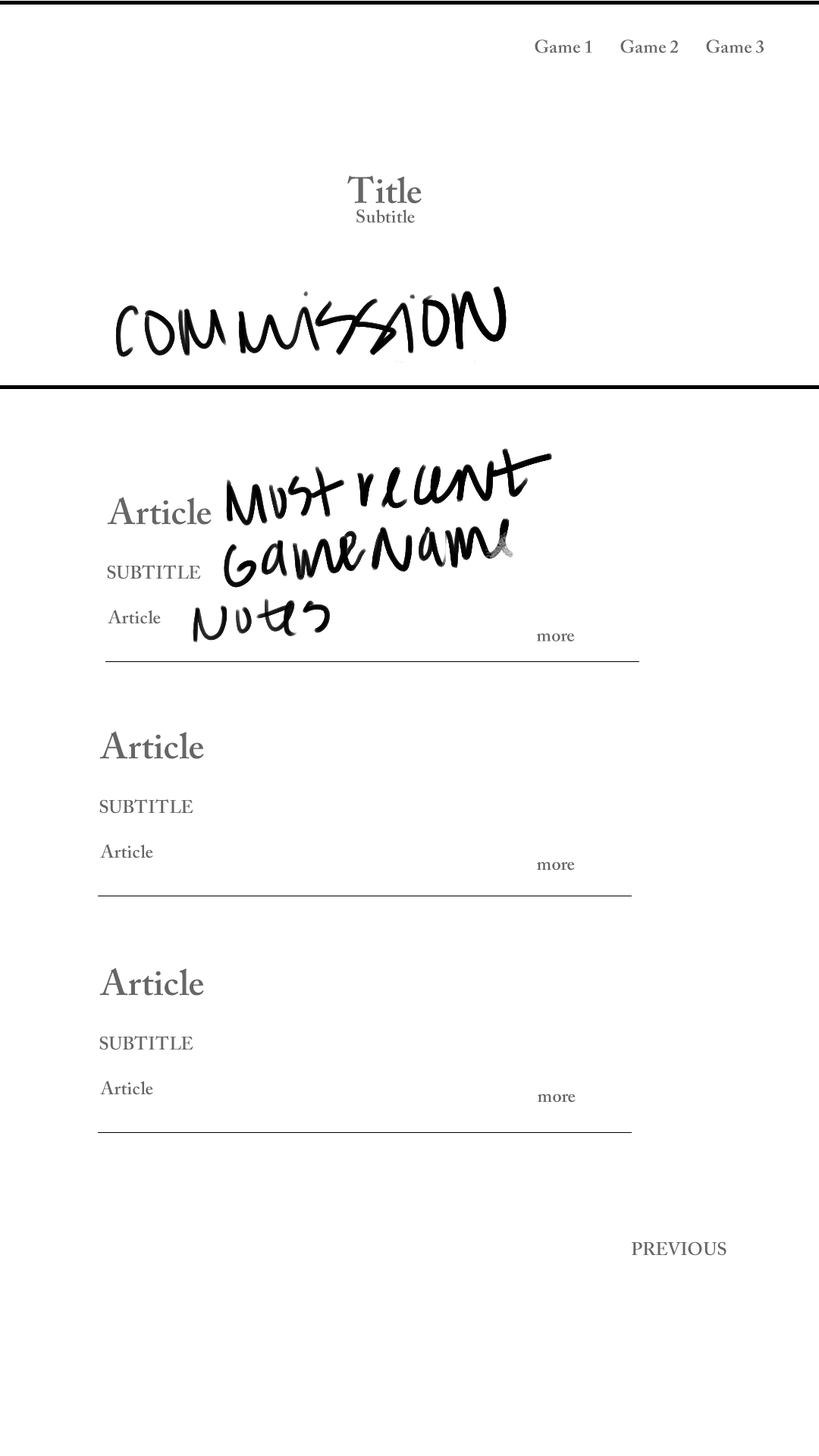
<style>
.page{position:relative;width:819px;height:1456px;background:#ffffff}
.page>*{position:absolute;margin:0}
.t1{font:18.2px "ACaslonPro-Semibold";color:#666666}
.t2{font:18.2px/19.7px "ACaslonPro-Semibold";color:#666666}
.t3{font:36.4px/19.7px "ACaslonPro-Semibold";color:#666666}
.t4{font:36.4px "ACaslonPro-Semibold";color:#666666}
</style>
<div class="page">
<p class="t1" style="left:535px;top:39px;width:229px;height:14px">Game 1       Game 2       Game 3</p>
<p class="t2" style="left:347px;top:175px;width:75px;height:48px;text-align:center"><span class="t3">Title<br></span>Subtitle</p>
<p class="t4" style="left:107px;top:497px;width:105px;height:28px">Article</p>
<p class="t1" style="left:107px;top:565px;width:94px;height:14px">SUBTITLE</p>
<p class="t1" style="left:108px;top:610px;width:53px;height:14px">Article</p>
<p class="t1" style="left:537px;top:633px;width:38px;height:9px">more</p>
<p class="t4" style="left:99px;top:731px;width:105px;height:28px">Article</p>
<p class="t1" style="left:99px;top:799px;width:94px;height:15px">SUBTITLE</p>
<p class="t1" style="left:100px;top:844px;width:53px;height:14px">Article</p>
<p class="t1" style="left:537px;top:861px;width:38px;height:10px">more</p>
<p class="t4" style="left:99px;top:968px;width:105px;height:28px">Article</p>
<p class="t1" style="left:99px;top:1036px;width:94px;height:14px">SUBTITLE</p>
<p class="t1" style="left:100px;top:1081px;width:53px;height:14px">Article</p>
<p class="t1" style="left:538px;top:1094px;width:38px;height:9px">more</p>
<p class="t1" style="left:632px;top:1241px;width:94px;height:15px">PREVIOUS</p>
</div>
